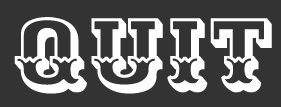
<style>
.page{position:relative;width:281px;height:107px;background:#333333}
.page>*{position:absolute;margin:0}
.t1{font:97.2px "Ewert-Regular";color:#ffffff}
</style>
<div class="page">
<p class="t1" style="left:14px;top:17px;width:258px;height:77px">Quit</p>
</div>
